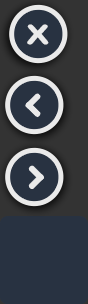
<style>
.page{position:relative;width:88px;height:304px;background:#283241}
.page>*{position:absolute;margin:0}
.t1{font:37.1px "ArialRoundedMTBold";color:#eaeaea;scale:1.21 1}
</style>
<div class="page">
<p class="t1" style="left:27px;top:24px;width:22px;height:21px">x</p>
</div>
